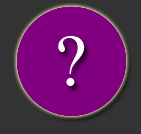
<style>
.page{position:relative;width:141px;height:134px;background:#800080}
.page>*{position:absolute;margin:0}
.t1{font:72px "TimesNewRomanPSMT";color:#fdfafd}
</style>
<div class="page">
<p class="t1" style="left:58px;top:36px;width:27px;height:50px">?</p>
</div>
